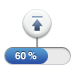
<style>
.page{position:relative;width:75px;height:75px;background:#ffffff}
.page>*{position:absolute;margin:0}
.t1{font:10px "Helvetica-Bold";color:#ffffff}
.t2{font:10px "Helvetica-Bold";letter-spacing:0.2em;color:#ffffff}
</style>
<div class="page">
<p class="t1" style="left:15px;top:51px;width:22px;height:9px">6<span class="t2">0</span>%</p>
</div>
